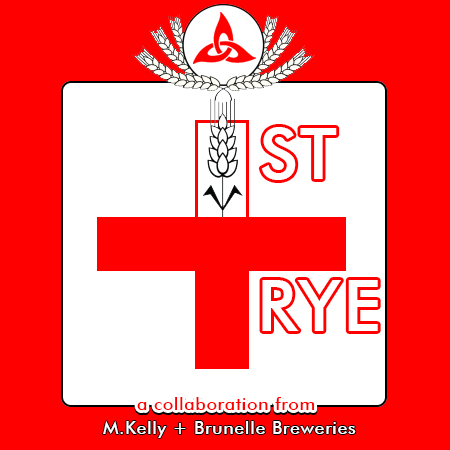
<style>
.page{position:relative;width:450px;height:450px;background:#ff0000}
.page>*{position:absolute;margin:0}
.t1{font:72px "FuturaBT-Medium";letter-spacing:0.02em;color:#ffffff}
.t2{font:72px "FuturaBT-Medium";letter-spacing:0.03em;color:#ffffff}
.t3{font:18px "FuturaBT-Medium";letter-spacing:0.03em}
.t4{font:18px "FuturaBT-Medium";letter-spacing:0.03em;color:#ff0000}
.t5{font:18px "FuturaBT-Medium";letter-spacing:0.03em;color:#ffffff}
</style>
<div class="page">
<p class="t1" style="left:261px;top:127px;width:76px;height:53px">ST</p>
<p class="t2" style="left:262px;top:280px;width:116px;height:51px">RYE</p>
<p class="t3" style="left:137px;top:399px;width:178px;height:13px">a collaboration from</p>
<p class="t4" style="left:137px;top:397px;width:178px;height:13px">a collaboration from</p>
<p class="t5" style="left:103px;top:421px;width:253px;height:17px">M.Kelly + Brunelle Breweries</p>
</div>
